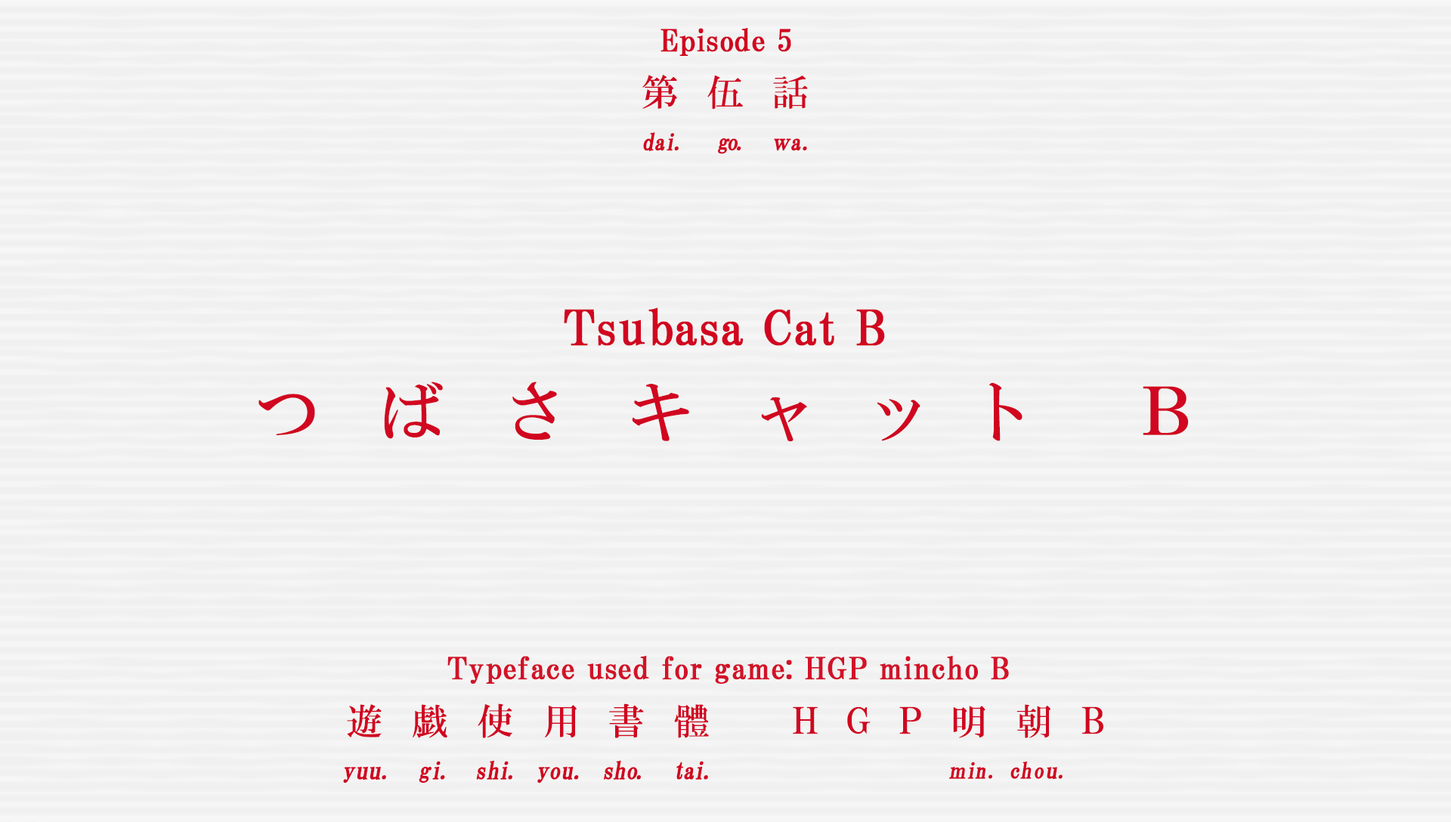
<style>
.page{position:relative;width:1451px;height:822px;background:#f0f0f0}
.page>*{position:absolute;margin:0}
.t1{font:30.2px "HGPMinchoB";letter-spacing:0.01em;color:#d10620;font-weight:bold}
.t2{font:36.5px "HGMinchoB";letter-spacing:0.79em;color:#d10620}
.t3{font:23.2px "HGMinchoB";letter-spacing:-0.1em;color:#d10620;font-weight:bold;scale:0.96 1}
.t4{font:23.2px "HGMinchoB";color:#d10620;font-weight:bold;scale:0.96 1}
.t5{font:23.2px "HGMinchoB";letter-spacing:-0.075em;color:#d10620;font-weight:bold;scale:0.96 1}
.t6{font:23.2px "HGMinchoB";letter-spacing:0.07em;color:#d10620;font-weight:bold;scale:0.96 1}
.t7{font:23.2px "HGMinchoB";letter-spacing:-0.05em;color:#d10620;font-weight:bold;scale:0.86 1}
.t8{font:48.4px "HGPMinchoB";letter-spacing:0.01em;color:#d10620;font-weight:bold}
.t9{font:65.7px "HGMinchoB";letter-spacing:0.89em;color:#d10620}
.t10{font:65.7px "HGMinchoB";letter-spacing:0.75em;color:#d10620}
.t11{font:65.7px "HGMinchoB";letter-spacing:0.55em;color:#d10620}
.t12{font:65.7px "HGMinchoB";letter-spacing:0.47em;color:#d10620}
.t13{font:30.2px "HGPMinchoB";letter-spacing:0.01em;color:#d21228;font-weight:bold}
.t14{font:36.3px "HGMinchoB";letter-spacing:0.81em;color:#d10620}
.t15{font:36.3px "HGMinchoB";letter-spacing:0.8em;color:#d10620}
.t16{font:36.3px "HGMinchoB";letter-spacing:0.79em;color:#d10620}
.t17{font:36.3px "HGMinchoB";letter-spacing:0.71em;color:#d10620;scale:0.85 1}
.t18{font:36.3px "HGMinchoB";letter-spacing:0.53em;color:#d10620}
.t19{font:24.2px "HGMinchoB";color:#d10620;font-weight:bold}
.t20{font:24.2px "HGMinchoB";letter-spacing:0.025em;color:#d10620;font-weight:bold;scale:0.96 1}
.t21{font:24.2px "HGMinchoB";letter-spacing:0.075em;color:#d10620;font-weight:bold;scale:0.96 1}
.t22{font:24.2px "HGMinchoB";letter-spacing:-0.025em;color:#d10620;font-weight:bold;scale:0.96 1}
.t23{font:24.2px "HGMinchoB";letter-spacing:-0.11em;color:#d10620;font-weight:bold;scale:0.96 1}
.t24{font:24.2px "HGMinchoB";color:#d10620;font-weight:bold;scale:0.96 1}
.t25{font:24.2px "HGMinchoB";letter-spacing:-0.05em;color:#d10620;font-weight:bold;scale:0.96 1}
.t26{font:24.2px "HGMinchoB";letter-spacing:-0.12em;color:#d10620;font-weight:bold;scale:0.96 1}
.t27{font:24.2px "HGMinchoB";letter-spacing:-0.01em;color:#d10620;font-weight:bold;scale:0.96 1}
.t28{font:24.2px "HGMinchoB";letter-spacing:0.005em;color:#d10620;font-weight:bold;scale:0.96 1}
.t29{font:24.2px "HGMinchoB";letter-spacing:-0.09em;color:#d10620;font-weight:bold;scale:0.96 1}
.t30{font:24.2px "HGMinchoB";letter-spacing:-0.075em;color:#d10620;font-weight:bold;scale:0.96 1}
.t31{font:24.2px "HGMinchoB";letter-spacing:-0.1em;color:#d10620;font-weight:bold;scale:0.96 1}
.t32{font:22px "HGMinchoB";letter-spacing:0.07em;color:#d10620;font-weight:bold;scale:0.96 1}
.t33{font:22px "HGMinchoB";letter-spacing:-0.075em;color:#d10620;font-weight:bold;scale:0.83 1}
.t34{font:22px "HGMinchoB";letter-spacing:-0.075em;color:#d10620;font-weight:bold;scale:0.96 1}
.t35{font:22px "HGMinchoB";color:#d10620;font-weight:bold;scale:0.96 1}
.t36{font:22px "HGMinchoB";letter-spacing:0.05em;color:#d10620;font-weight:bold;scale:0.96 1}
.t37{font:22px "HGMinchoB";letter-spacing:0.01em;color:#d10620;font-weight:bold;scale:1.06 1}
</style>
<div class="page">
<p class="t1" style="left:660px;top:28px;width:131px;height:28px">Episode 5</p>
<p class="t2" style="left:642px;top:75px;width:166px;height:35px">第伍話</p>
<p class="t3" style="left:643px;top:132px;width:164px;height:22px"><span class="t4">d</span><span class="t5">a</span>i<span class="t6">.  </span>go<span class="t6">.  </span><span class="t7">ｗ</span><span class="t4">a</span><span class="t6">.</span></p>
<p class="t8" style="left:564px;top:308px;width:321px;height:38px">Tsubasa Cat B</p>
<p class="t9" style="left:258px;top:382px;width:930px;height:60px">つばさキ<span class="t10">ャ</span><span class="t11">ット</span><span class="t12"> Ｂ</span></p>
<p class="t13" style="left:447px;top:656px;width:562px;height:28px">Typeface used for game: HGP mincho B</p>
<p class="t14" style="left:347px;top:703px;width:362px;height:35px">遊<span class="t15">戯</span>使<span class="t16">用</span>書體</p>
<p class="t17" style="left:793px;top:706px;width:310px;height:28px">ＨＧＰ    Ｂ</p>
<p class="t16" style="left:953px;top:704px;width:97px;height:34px">明<span class="t18">朝</span></p>
<p class="t19" style="left:343px;top:760px;width:365px;height:23px"><span class="t20">y</span>uu<span class="t21">. </span><span class="t22">g</span><span class="t23">i</span><span class="t21">. </span><span class="t24">s</span><span class="t25">h</span><span class="t26">i</span><span class="t21">. </span><span class="t27">y</span><span class="t28">ou</span><span class="t21">. </span><span class="t22">s</span><span class="t24">h</span><span class="t29">o</span><span class="t21">.  </span><span class="t30">t</span><span class="t31">ai</span><span class="t21">.</span></p>
<p class="t32" style="left:949px;top:761px;width:113px;height:19px"><span class="t33">ｍ</span><span class="t34">i</span>n. <span class="t35">c</span>h<span class="t36">o</span><span class="t37">u</span>.</p>
</div>
